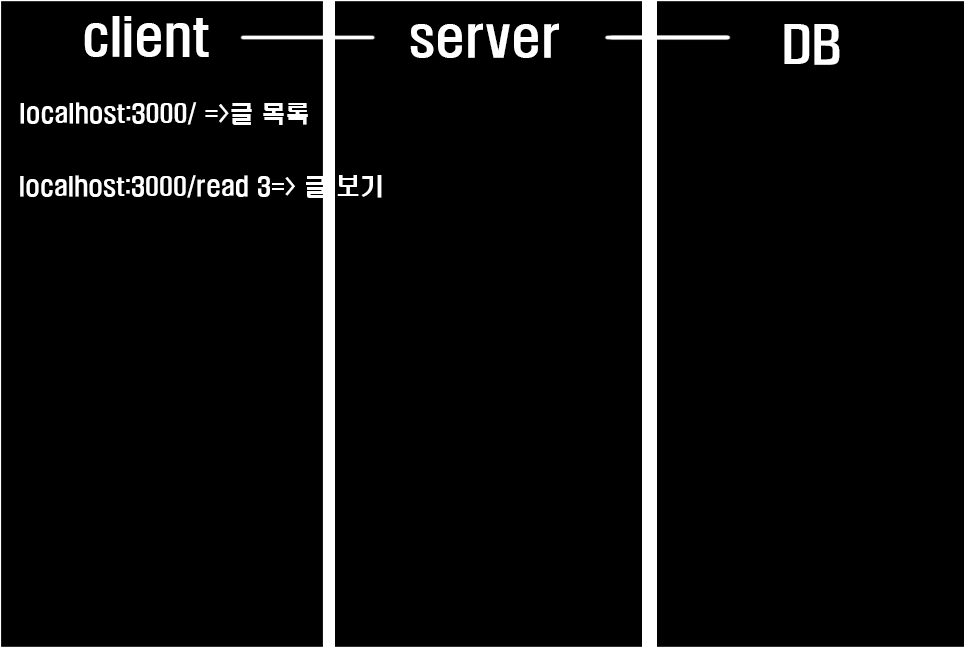
<style>
.page{position:relative;width:965px;height:648px;background:#000000}
.page>*{position:absolute;margin:0}
.t1{font:48px "H2hdrM";color:#ffffff}
.t2{font:24px "H2hdrM";color:#ffffff}
</style>
<div class="page">
<p class="t1" style="left:84px;top:16px;width:125px;height:41px">client</p>
<p class="t1" style="left:410px;top:23px;width:149px;height:35px">server</p>
<p class="t1" style="left:784px;top:24px;width:56px;height:41px">DB</p>
<p class="t2" style="left:20px;top:102px;width:288px;height:23px">localhost:3000/ =&gt;글 목록</p>
<p class="t2" style="left:20px;top:175px;width:362px;height:23px">localhost:3000/read 3=&gt; 글 보기</p>
</div>
